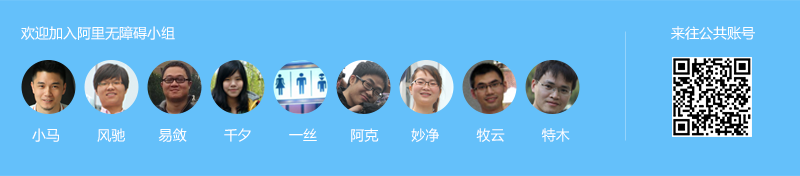
<style>
.page{position:relative;width:800px;height:176px;background:#64c0fa}
.page>*{position:absolute;margin:0}
.t1{font:14px "MicrosoftYaHei";color:#ffffff}
</style>
<div class="page">
<p class="t1" style="left:21px;top:26px;width:154px;height:14px">欢迎加入阿里无障碍小组</p>
<p class="t1" style="left:671px;top:26px;width:84px;height:14px">来往公共账号</p>
<p class="t1" style="left:32px;top:128px;width:538px;height:14px">小马         风驰        易敛         千夕         一丝        阿克        妙净         牧云         特木</p>
</div>
